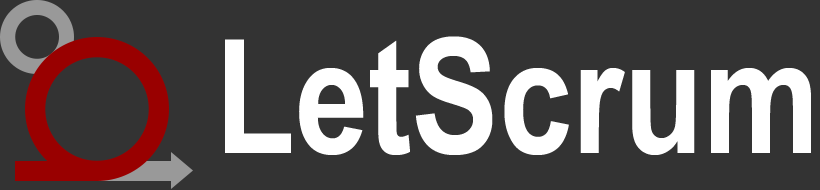
<style>
.page{position:relative;width:820px;height:190px;background:#333333}
.page>*{position:absolute;margin:0}
.t1{font:160px "ArialNarrow-Bold";color:#ffffff}
</style>
<div class="page">
<p class="t1" style="left:225px;top:36px;width:586px;height:119px">LetScrum</p>
</div>
